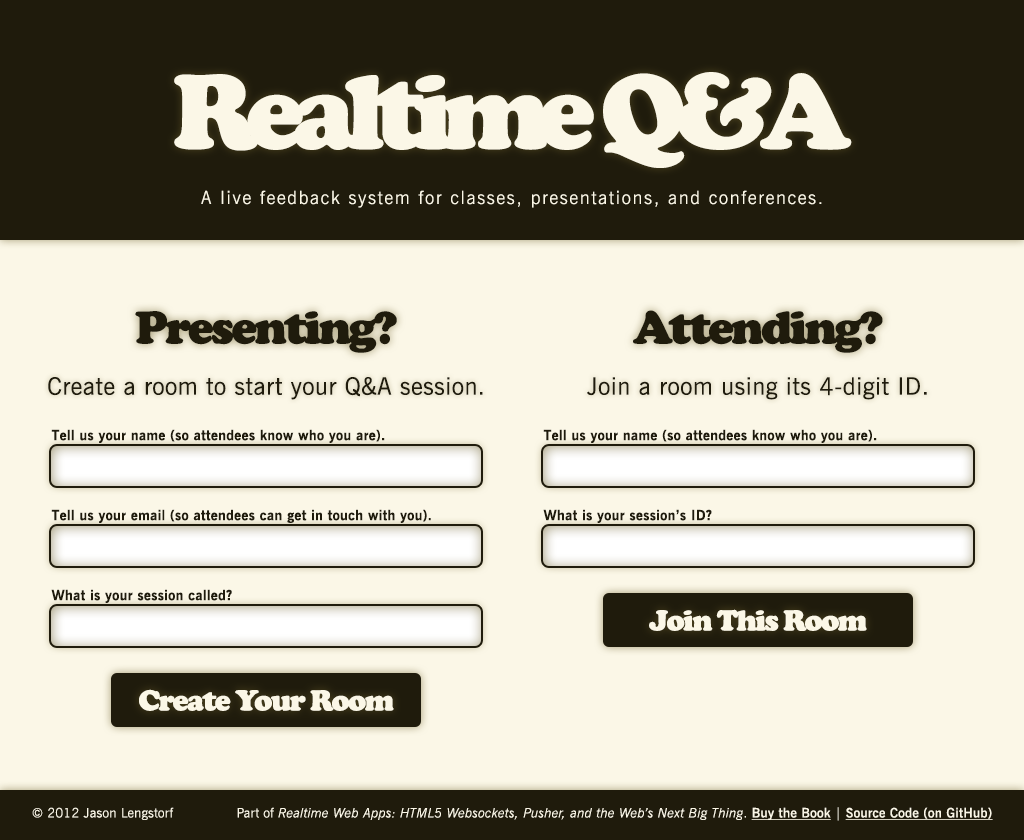
<style>
.page{position:relative;width:1024px;height:840px;background:#fbf7e7}
.page>*{position:absolute;margin:0}
.t1{font:110px "CooperBlack";letter-spacing:-0.1em;color:#fbf7e7}
.t2{font:18px "NewsGothicBT-Light";letter-spacing:0.1em;color:#fbf7e7}
.t3{font:48px "CooperBlack";letter-spacing:-0.05em;color:#1f1b0c}
.t4{font:24px "NewsGothicBT-Roman";letter-spacing:0.025em;color:#1f1b0c}
.t5{font:14px "NewsGothicBT-Bold";letter-spacing:0.025em;color:#1f1b0c}
.t6{font:30px "CooperBlack";letter-spacing:-0.05em;color:#fbf7e7}
.t7{font:13px "NewsGothicBT-LightItalic";letter-spacing:0.025em;color:#fbf7e7}
.t8{font:13px "NewsGothicBT-Light";letter-spacing:0.025em;color:#fbf7e7}
.t9{font:13px "NewsGothicBT-Demi";letter-spacing:0.025em;color:#fbf7e7;text-decoration:underline}
</style>
<div class="page">
<p class="t1" style="left:174px;top:72px;width:678px;height:96px">Realtime Q&amp;A</p>
<p class="t2" style="left:201px;top:190px;width:621px;height:18px">A live feedback system for classes, presentations, and conferences.</p>
<p class="t3" style="left:135px;top:311px;width:262px;height:42px">Presenting?</p>
<p class="t3" style="left:633px;top:310px;width:250px;height:43px">Attending?</p>
<p class="t4" style="left:48px;top:377px;width:435px;height:23px">Create a room to start your Q&amp;A session.</p>
<p class="t4" style="left:587px;top:377px;width:340px;height:23px">Join a room using its 4-digit ID.</p>
<p class="t5" style="left:51px;top:429px;width:334px;height:14px">Tell us your name (so attendees know who you are).</p>
<p class="t5" style="left:543px;top:429px;width:334px;height:14px">Tell us your name (so attendees know who you are).</p>
<p class="t5" style="left:51px;top:509px;width:380px;height:14px">Tell us your email (so attendees can get in touch with you).</p>
<p class="t5" style="left:543px;top:509px;width:169px;height:14px">What is your session’s ID?</p>
<p class="t5" style="left:51px;top:589px;width:181px;height:14px">What is your session called?</p>
<p class="t6" style="left:649px;top:609px;width:218px;height:22px">Join This Room</p>
<p class="t6" style="left:139px;top:689px;width:255px;height:22px">Create Your Room</p>
<p class="t7" style="left:32px;top:807px;width:961px;height:14px"><span class="t8">© 2012 Jason Lengstorf Part of </span>Realtime Web Apps: HTML5 Websockets, Pusher, and the Web’s Next Big Thing<span class="t8">. </span><span class="t9">Buy the Book</span><span class="t8"> | </span><span class="t9">Source Code (on GitHub)</span></p>
</div>
